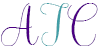
<style>
.page{position:relative;width:100px;height:50px;background:#ffffff}
.page>*{position:absolute;margin:0}
.t1{font:50px "Balqis";color:#4b0082}
.t2{font:50px "Balqis";color:#429ea6}
</style>
<div class="page">
<p class="t1" style="left:1px;top:3px;width:38px;height:43px">A</p>
<p class="t2" style="left:40px;top:3px;width:29px;height:43px">J</p>
<p class="t1" style="left:67px;top:3px;width:31px;height:43px">C</p>
</div>
